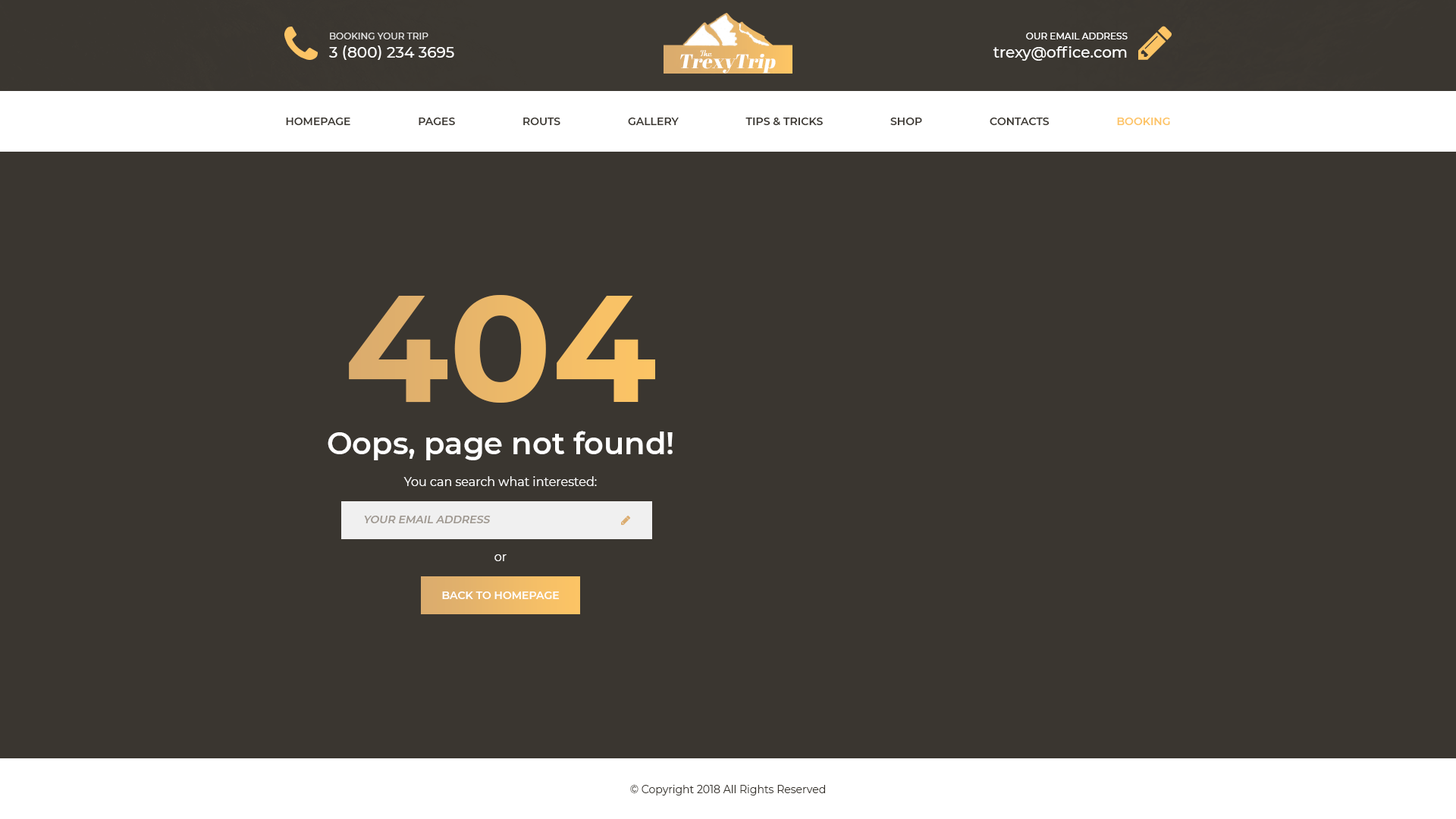
<style>
.page{position:relative;width:1456px;height:819px;background:#3a3630}
.page>*{position:absolute;margin:0}
.t1{font:9.1px "Montserrat-Medium";color:#e1e1e0;text-transform:uppercase}
.t2{font:9.1px "Montserrat-Medium";color:#fefefe;text-transform:uppercase}
.t3{font:15.2px "Montserrat-Medium";color:#ffffff;text-transform:uppercase}
.t4{font:19.7px "AbrilFatface-Regular";color:#fefefe;font-style:italic}
.t5{font:15.2px "Montserrat-Medium";color:#ffffff}
.t6{font:10.6px "Montserrat-SemiBold";color:#3a3630;text-transform:uppercase}
.t7{font:10.6px "Montserrat-SemiBold";color:#fdc465;text-transform:uppercase}
.t8{font:151.7px "Montserrat-Bold";color:#ebb869;text-transform:uppercase}
.t9{font:30.3px "Montserrat-SemiBold";color:#fffffe}
.t10{font:12.1px "Montserrat-Regular";color:#ffffff}
.t11{font:10.6px "Montserrat-SemiBold";color:#9e978f;text-transform:uppercase;font-style:italic}
.t12{font:10.6px "Montserrat-SemiBold";color:#ffffff;text-transform:uppercase}
.t13{font:10.6px "Montserrat-Regular";color:#3a3630}
</style>
<div class="page">
<p class="t1" style="left:330px;top:33px;width:98px;height:6px">Booking your trip</p>
<p class="t2" style="left:1026px;top:33px;width:102px;height:6px">Our Email address</p>
<p class="t3" style="left:329px;top:45px;width:125px;height:15px">3 (800) 234 3695</p>
<p class="t4" style="left:680px;top:54px;width:96px;height:20px">TrexyTrip</p>
<p class="t5" style="left:993px;top:46px;width:134px;height:15px">trexy@office.com</p>
<p class="t6" style="left:286px;top:118px;width:884px;height:7px">Homepage                       Pages                       Routs                       Gallery                       Tips &amp; Tricks                       Shop                       Contacts                       <span class="t7">Booking</span></p>
<p class="t8" style="left:349px;top:295px;width:306px;height:108px">404</p>
<p class="t9" style="left:328px;top:431px;width:345px;height:29px">Oops, page not found!</p>
<p class="t10" style="left:403px;top:476px;width:194px;height:10px">You can search what interested:</p>
<p class="t11" style="left:364px;top:516px;width:127px;height:7px">Your email address</p>
<p class="t10" style="left:494px;top:554px;width:13px;height:7px">or</p>
<p class="t12" style="left:442px;top:591px;width:117px;height:8px">Back to homepage</p>
<p class="t13" style="left:630px;top:785px;width:195px;height:10px">© Copyright 2018 All Rights Reserved</p>
</div>
